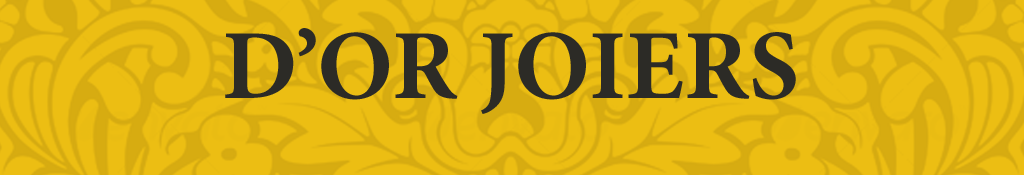
<style>
.page{position:relative;width:1024px;height:175px;background:#ecbe13}
.page>*{position:absolute;margin:0}
.t1{font:99.2px "MinionPro-Bold";color:#2c2b26}
</style>
<div class="page">
<p class="t1" style="left:225px;top:28px;width:571px;height:86px">D’OR JOIERS</p>
</div>
